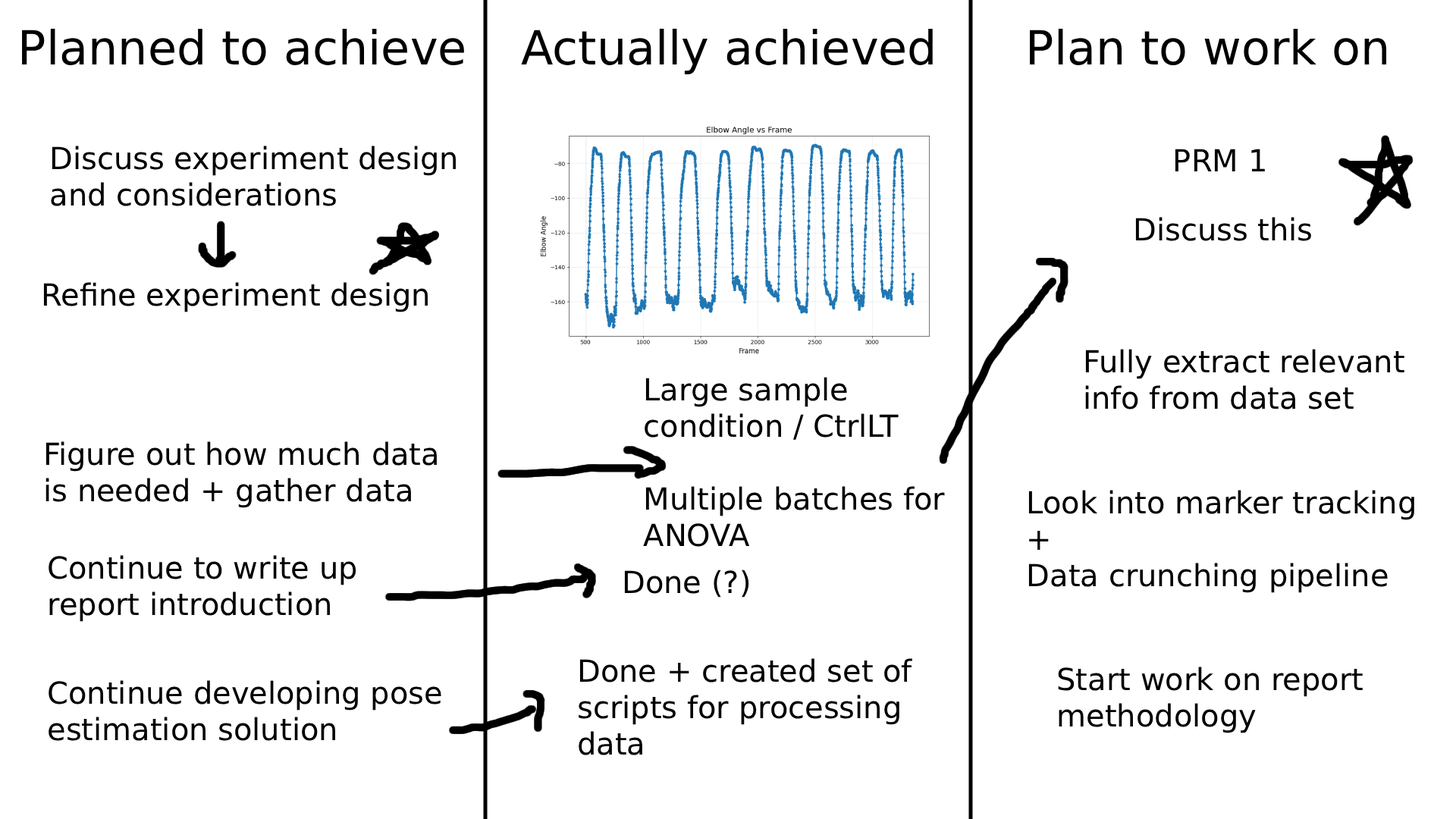
<style>
.page{position:relative;width:1456px;height:819px;background:#ffffff}
.page>*{position:absolute;margin:0}
.t1{font:47px "DejaVuSans";color:#000000}
.t2{font:30.3px "DejaVuSans";color:#000000}
</style>
<div class="page">
<p class="t1" style="left:22px;top:28px;width:442px;height:37px">Planned to achieve</p>
<p class="t1" style="left:521px;top:28px;width:412px;height:46px">Actually achieved</p>
<p class="t1" style="left:1030px;top:28px;width:357px;height:37px">Plan to work on</p>
<p class="t2" style="left:51px;top:146px;width:405px;height:60px">Discuss experiment design <br>and considerations</p>
<p class="t2" style="left:1175px;top:149px;width:90px;height:22px">PRM 1</p>
<p class="t2" style="left:1135px;top:217px;width:176px;height:24px">Discuss this</p>
<p class="t2" style="left:43px;top:282px;width:385px;height:30px">Refine experiment design</p>
<p class="t2" style="left:1085px;top:349px;width:319px;height:60px">Fully extract relevant <br>info from data set</p>
<p class="t2" style="left:643px;top:377px;width:302px;height:170px">Large sample<br>condition / CtrlLT<br><br>Multiple batches for<br>ANOVA</p>
<p class="t2" style="left:45px;top:441px;width:392px;height:67px">Figure out how much data<br>is needed + gather data</p>
<p class="t2" style="left:1028px;top:490px;width:386px;height:103px">Look into marker tracking<br>+<br>Data crunching pipeline</p>
<p class="t2" style="left:49px;top:555px;width:307px;height:67px">Continue to write up<br>report introduction</p>
<p class="t2" style="left:624px;top:570px;width:125px;height:28px">Done (?)</p>
<p class="t2" style="left:579px;top:658px;width:333px;height:97px">Done + created set of<br>scripts for processing<br>data</p>
<p class="t2" style="left:1058px;top:667px;width:305px;height:66px">Start work on report<br>methodology</p>
<p class="t2" style="left:49px;top:680px;width:392px;height:61px">Continue developing pose<br>estimation solution</p>
</div>
